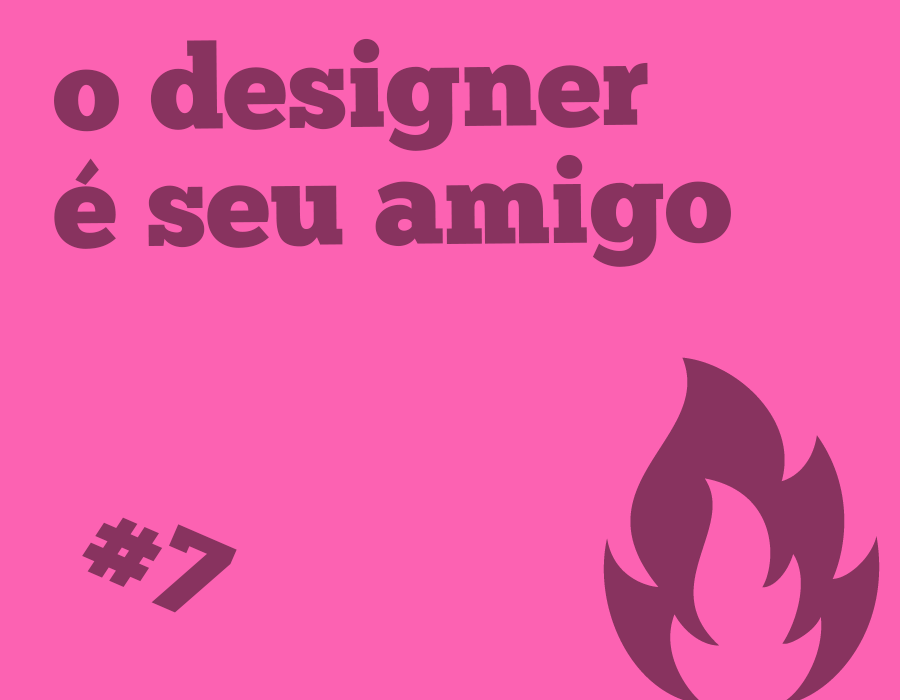
<style>
.page{position:relative;width:900px;height:700px;background:#fc62b2}
.page>*{position:absolute;margin:0}
.t1{font:117.5px/117.4px "ChunkFive-Roman";color:#88335f}
.t2{font:117.5px "ChunkFive-Roman";color:#88335f}
</style>
<div class="page">
<p class="t1" style="left:54px;top:38px;width:677px;height:229px">o designer<br>é seu amigo</p>
<p class="t2" style="left:82px;top:517px;width:155px;height:96px;rotate:23deg">#7</p>
</div>
